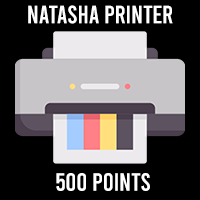
<style>
.page{position:relative;width:200px;height:200px;background:#000000}
.page>*{position:absolute;margin:0}
.t1{font:25px "Bebas-Regular";color:#ffffff}
</style>
<div class="page">
<p class="t1" style="left:28px;top:5px;width:145px;height:19px">Natasha Printer</p>
<p class="t1" style="left:56px;top:173px;width:94px;height:18px">500 Points</p>
</div>
